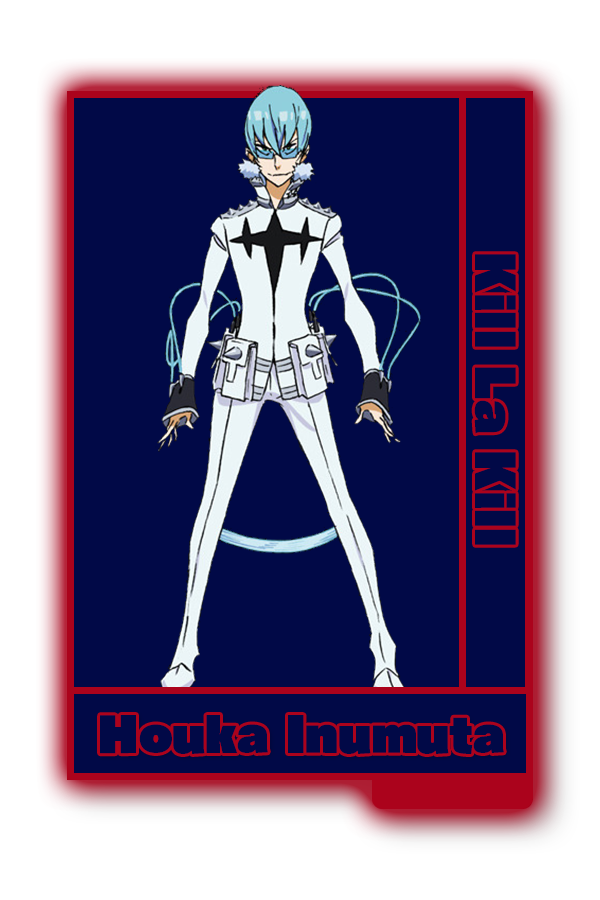
<style>
.page{position:relative;width:600px;height:900px;background:#010947}
.page>*{position:absolute;margin:0}
.t1{font:48.8px "RaglanPunchStd-UB";color:#010947}
.t2{font:45.6px "RaglanPunchStd-UB";color:#010947}
</style>
<div class="page">
<p class="t1" style="left:474px;top:254px;width:42px;height:291px;rotate:90deg">Kill La Kill</p>
<p class="t2" style="left:100px;top:715px;width:404px;height:39px">Houka Inumuta</p>
</div>
